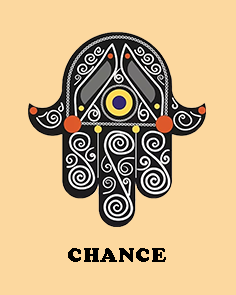
<style>
.page{position:relative;width:236px;height:295px;background:#fcd89f}
.page>*{position:absolute;margin:0}
.t1{font:20.8px "CooperBlack";letter-spacing:0.025em;color:#000000}
</style>
<div class="page">
<p class="t1" style="left:68px;top:248px;width:98px;height:14px">CHANCE</p>
</div>
